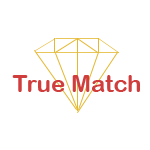
<style>
.page{position:relative;width:150px;height:150px;background:#ffffff}
.page>*{position:absolute;margin:0}
.t1{font:24px "ArialRoundedMTBold";color:#d03d3d}
</style>
<div class="page">
<p class="t1" style="left:12px;top:75px;width:128px;height:17px">True Match</p>
</div>
